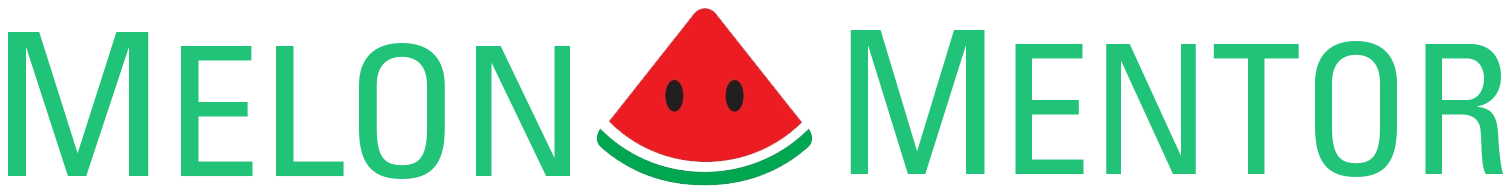
<style>
.page{position:relative;width:1510px;height:190px;background:#ffffff}
.page>*{position:absolute;margin:0}
.t1{font:180px "Univers-Condensed";color:#21c379}
.t2{font:200px "Univers-Condensed";color:#21c379}
.t3{font:180px "Univers-Condensed";color:#21c379;scale:1.05 1}
.t4{font:200px "Univers-Condensed";color:#21c379;scale:1.05 1}
</style>
<div class="page">
<p class="t1" style="left:850px;top:30px;width:653px;height:147px"><span class="t2">M</span>ENTOR</p>
<p class="t3" style="left:8px;top:32px;width:562px;height:147px"><span class="t4">M</span>ELON</p>
</div>
